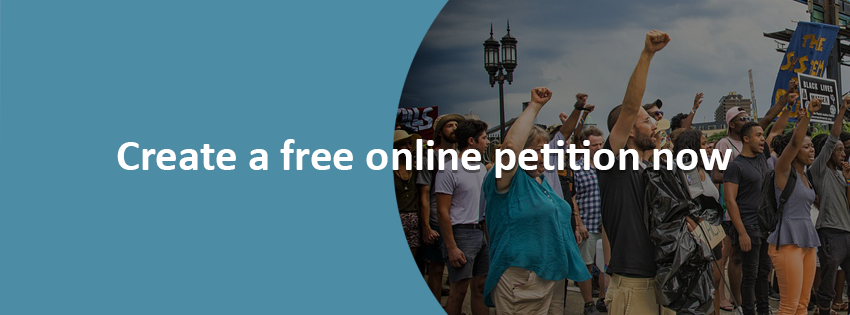
<style>
.page{position:relative;width:850px;height:315px;background:#4d8ca5}
.page>*{position:absolute;margin:0}
.t1{font:45px "Calibri-Bold";color:#ffffff}
</style>
<div class="page">
<p class="t1" style="left:117px;top:139px;width:271px;height:31px">Create a free o</p>
<p class="t1" style="left:392px;top:139px;width:340px;height:39px">nline petition now</p>
</div>
